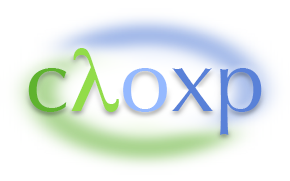
<style>
.page{position:relative;width:290px;height:181px;background:#ffffff}
.page>*{position:absolute;margin:0}
.t1{font:90px "Optima-Regular";color:#5981d8}
.t2{font:90px "Optima-Regular";color:#5fb32e}
.t3{font:90px "Symbol";color:#92dc49}
.t4{font:90px "Optima-Regular";color:#95b9ff}
</style>
<div class="page">
<p class="t1" style="left:28px;top:48px;width:234px;height:87px"><span class="t2">c</span><span class="t3">l</span><span class="t4">o</span>xp</p>
</div>
